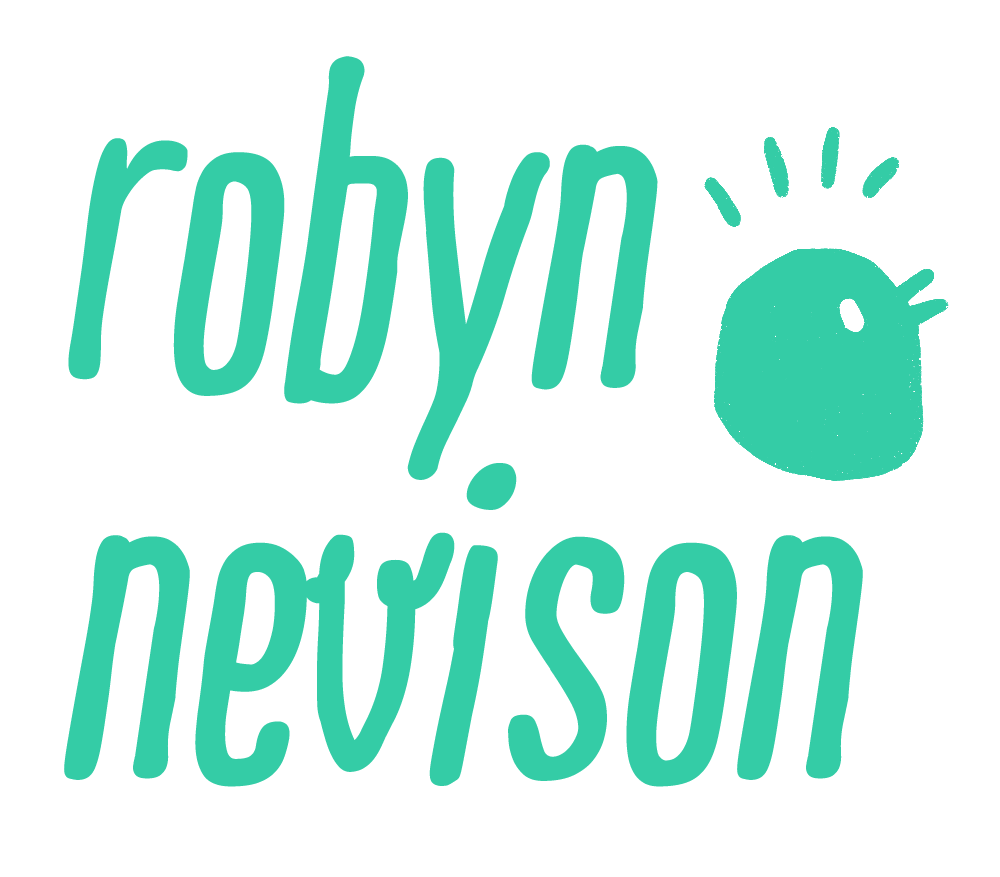
<style>
.page{position:relative;width:1000px;height:877px;background:#ffffff}
.page>*{position:absolute;margin:0}
.t1{font:468.6px/390.5px "RidemyBikeProBold-Italic";letter-spacing:0.005em;color:#34cca6}
</style>
<div class="page">
<p class="t1" style="left:64px;top:56px;width:799px;height:731px">robyn<br>nevison</p>
</div>
